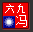
<style>
.page{position:relative;width:33px;height:32px;background:#f20000}
.page>*{position:absolute;margin:0}
.t1{font:10.4px "SimSun";color:#ffffff}
.t2{font:11.7px "SimSun";color:#ffffff}
</style>
<div class="page">
<p class="t1" style="left:5px;top:4px;width:20px;height:9px">六九</p>
<p class="t2" style="left:16px;top:15px;width:11px;height:12px">冯</p>
</div>
